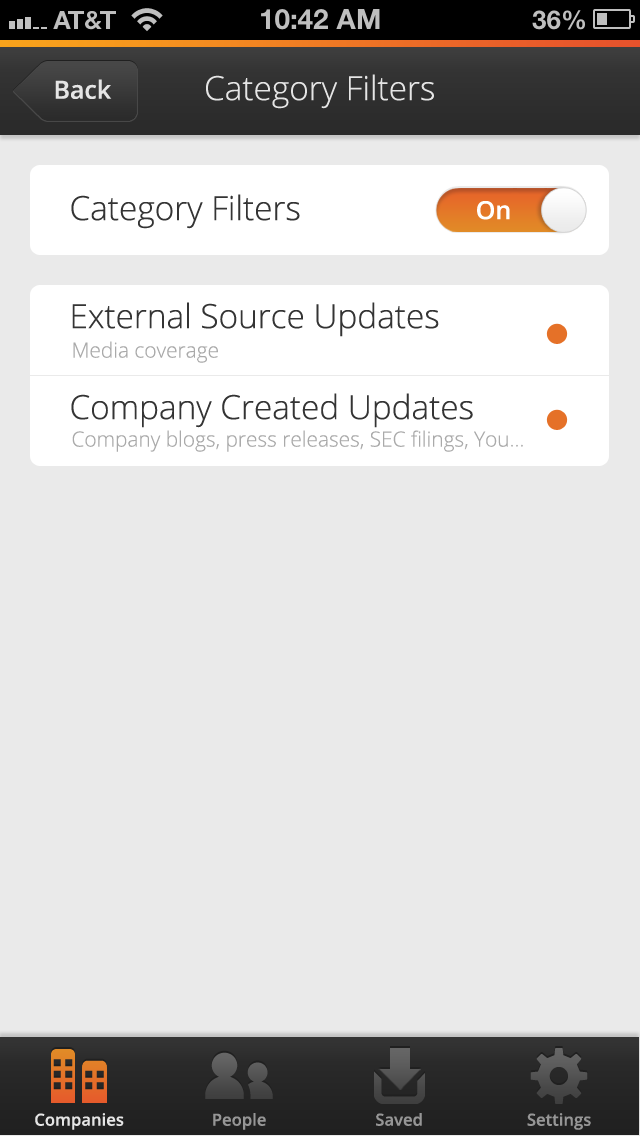
<style>
.page{position:relative;width:640px;height:1136px;background:#eaeaea}
.page>*{position:absolute;margin:0}
.t1{font:33.3px "OpenSans-Light";color:#e5e5e5}
.t2{font:25px "OpenSans-Semibold";color:#e5e5e5}
.t3{font:33.3px "OpenSans-Light";color:#343434}
.t4{font:25px "OpenSans-Semibold";color:#ffffff}
.t5{font:20.8px "OpenSans-Light";color:#aaaaaa}
.t6{font:16.7px "OpenSans-Semibold";color:#e5e5e5}
.t7{font:16.7px "OpenSans-Semibold";color:#969696}
</style>
<div class="page">
<p class="t1" style="left:206px;top:74px;width:228px;height:35px">Category Filters</p>
<p class="t2" style="left:55px;top:79px;width:57px;height:20px">Back</p>
<p class="t3" style="left:71px;top:194px;width:229px;height:35px">Category Filters</p>
<p class="t4" style="left:477px;top:201px;width:33px;height:19px">On</p>
<p class="t3" style="left:72px;top:302px;width:367px;height:35px">External Source Updates</p>
<p class="t5" style="left:73px;top:341px;width:145px;height:22px">Media coverage</p>
<p class="t3" style="left:71px;top:393px;width:402px;height:35px">Company Created Updates</p>
<p class="t5" style="left:72px;top:430px;width:451px;height:22px">Company blogs, press releases, SEC filings, You...</p>
<p class="t6" style="left:35px;top:1113px;width:89px;height:17px">Companies</p>
<p class="t7" style="left:213px;top:1113px;width:53px;height:17px">People</p>
<p class="t7" style="left:376px;top:1113px;width:46px;height:13px">Saved</p>
<p class="t7" style="left:527px;top:1113px;width:64px;height:17px">Settings</p>
</div>
